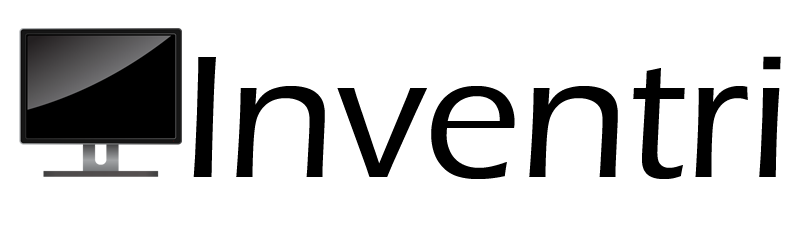
<style>
.page{position:relative;width:800px;height:250px;background:#ffffff}
.page>*{position:absolute;margin:0}
.t1{font:180px "ErasITC-Medium";color:#000000}
</style>
<div class="page">
<p class="t1" style="left:193px;top:56px;width:588px;height:123px">Inventri</p>
</div>
